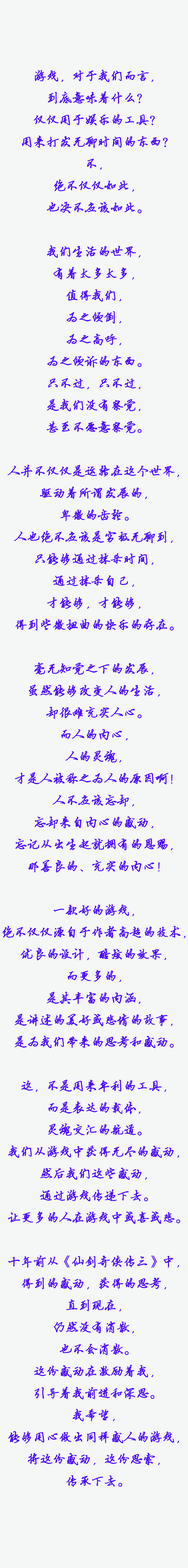
<style>
.page{position:relative;width:188px;height:1568px;background:#f5f6f6}
.page>*{position:absolute;margin:0}
.t1{font:12.5px "Jyinbixinsu";color:#4800ff;font-weight:bold}
</style>
<div class="page">
<p class="t1" style="left:2px;top:70px;width:184px;height:1417px;text-align:center">游戏，对于我们而言，<br>到底意味着什么？<br>仅仅用于娱乐的工具？<br>用来打发无聊时间的东西？<br>不，<br>绝不仅仅如此，<br>也决不应该如此。<br><br>我们生活的世界，<br>有着太多太多，<br>值得我们，<br>为之倾倒，<br>为之高呼，<br>为之倾诉的东西。<br>只不过，只不过，<br>是我们没有察觉，<br>甚至不愿意察觉。<br><br>人并不仅仅是运转在这个世界，<br>驱动着所谓发展的，<br>卑微的齿轮。<br>人也绝不应该是穷极无聊到，<br>只能够通过抹杀时间，<br>通过抹杀自己，<br>才能够，才能够，<br>得到些微扭曲的快乐的存在。<br><br>毫无知觉之下的发展，<br>虽然能够改变人的生活，<br>却很难充实人心。<br>而人的内心，<br>人的灵魂，<br>才是人被称之为人的原因啊！<br>人不应该忘却，<br>忘却来自内心的感动，<br>忘记从出生起就拥有的恩赐，<br>那善良的、充实的内心！<br><br>一款好的游戏，<br>绝不仅仅源自于作者高超的技术，<br>优良的设计，酷炫的效果，<br>而更多的，<br>是其丰富的内涵，<br>是讲述的美好或悲情的故事，<br>是为我们带来的思考和感动。<br><br>这，不是用来牟利的工具，<br>而是表达的载体，<br>灵魂交汇的航道。<br>我们从游戏中获得无尽的感动，<br>然后我们这些感动，<br>通过游戏传递下去。<br>让更多的人在游戏中或喜或悲。<br><br>十年前从《仙剑奇侠传三》中，<br>得到的感动，获得的思考，<br>直到现在，<br>仍然没有消散，<br>也不会消散。<br>这份感动在激励着我，<br>引导着我前进和深思。<br>我希望，<br>能够用心做出同样感人的游戏，<br>将这份感动，这份思索，<br>传承下去。</p>
</div>
